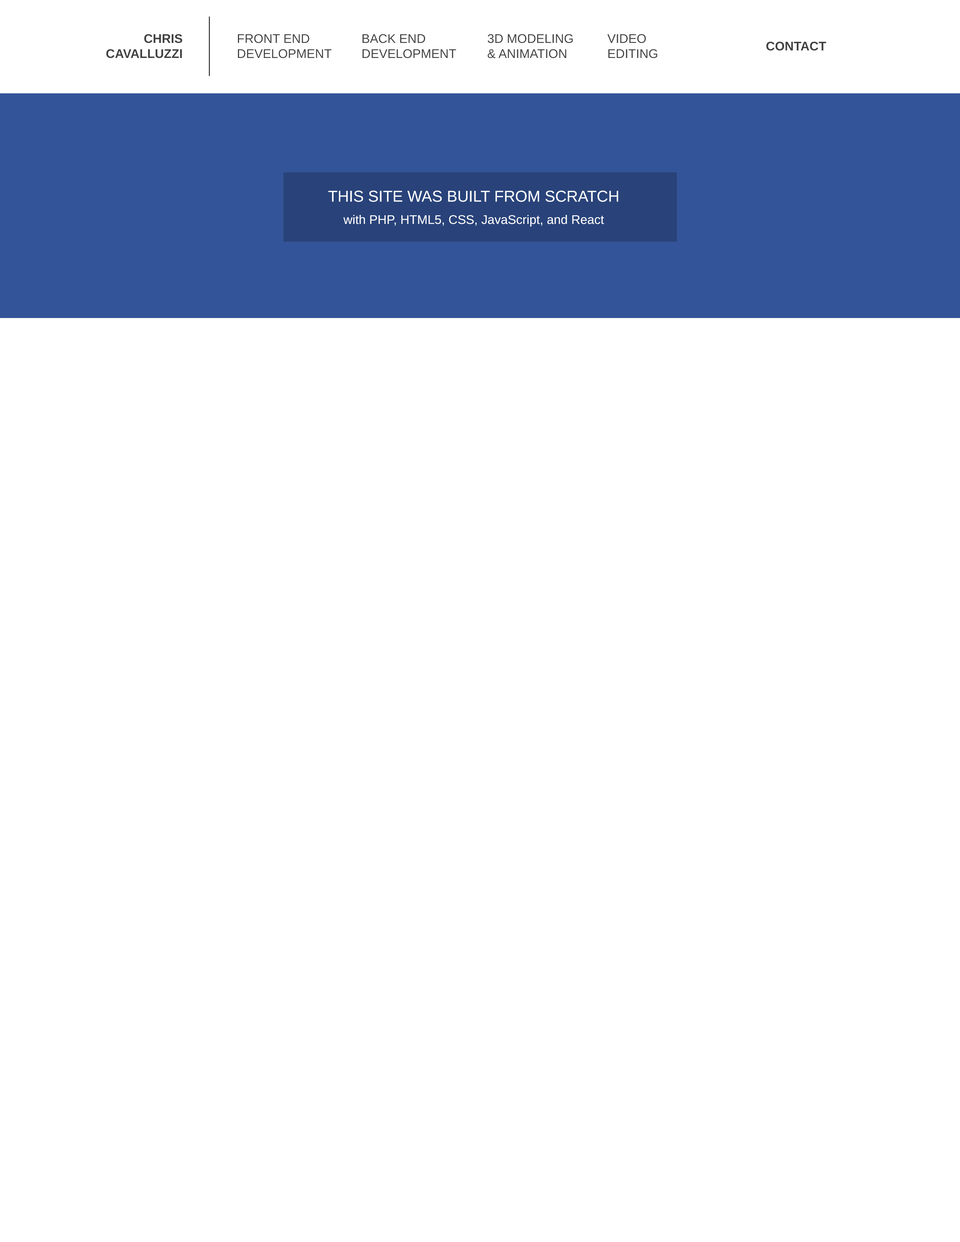
<style>
.page{position:relative;width:960px;height:1242px;background:#ffffff}
.page>*{position:absolute;margin:0}
.t1{font:12.5px "LiberationSans-Bold";color:#404040}
.t2{font:12.5px "LiberationSans";color:#404040}
.t3{font:15.7px "LiberationSans";color:#ffffff}
.t4{font:12.5px "LiberationSans";color:#ffffff}
</style>
<div class="page">
<p class="t1" style="left:106px;top:34px;width:76px;height:24px;text-align:right">CHRIS<br>CAVALLUZZI</p>
<p class="t2" style="left:238px;top:34px;width:94px;height:24px">FRONT END<br>DEVELOPMENT</p>
<p class="t2" style="left:363px;top:34px;width:93px;height:24px">BACK END<br>DEVELOPMENT</p>
<p class="t2" style="left:487px;top:34px;width:86px;height:24px">3D MODELING<br>&amp; ANIMATION</p>
<p class="t2" style="left:607px;top:34px;width:50px;height:24px">VIDEO<br>EDITING</p>
<p class="t1" style="left:766px;top:41px;width:60px;height:10px">CONTACT</p>
<p class="t3" style="left:328px;top:190px;width:290px;height:12px">THIS SITE WAS BUILT FROM SCRATCH</p>
<p class="t4" style="left:343px;top:215px;width:261px;height:12px">with PHP, HTML5, CSS, JavaScript, and React</p>
</div>
